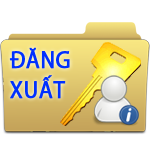
<style>
.page{position:relative;width:150px;height:150px;background:#ffffff}
.page>*{position:absolute;margin:0}
.t1{font:25px "MyriadPro-Regular";color:#0030ff;font-weight:bold;scale:0.9 1}
</style>
<div class="page">
<p class="t1" style="left:9px;top:47px;width:61px;height:52px">ĐĂNG<br>XUẤT</p>
</div>
